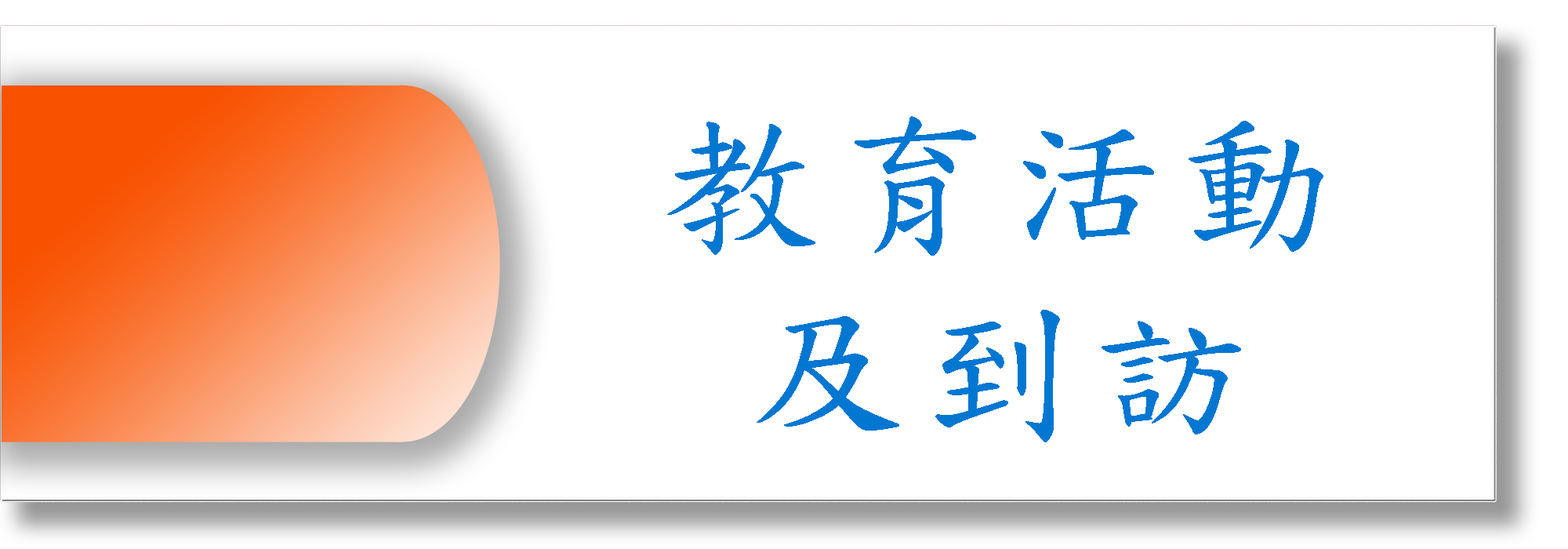
<style>
.page{position:relative;width:1568px;height:549px;background:#ffffff}
.page>*{position:absolute;margin:0}
.t1{font:156.8px "DFKaiShu-SB-Estd-BF";letter-spacing:0.08em;color:#0277d2}
</style>
<div class="page">
<p class="t1" style="left:667px;top:116px;width:656px;height:326px;text-align:center">教育活動<br>及到訪</p>
</div>
